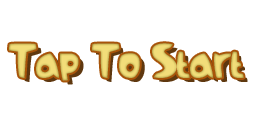
<style>
.page{position:relative;width:256px;height:128px;background:#ffffff}
.page>*{position:absolute;margin:0}
.t1{font:49.5px "Samba"}
</style>
<div class="page">
<p class="t1" style="left:14px;top:47px;width:234px;height:38px">Tap To Start</p>
</div>
